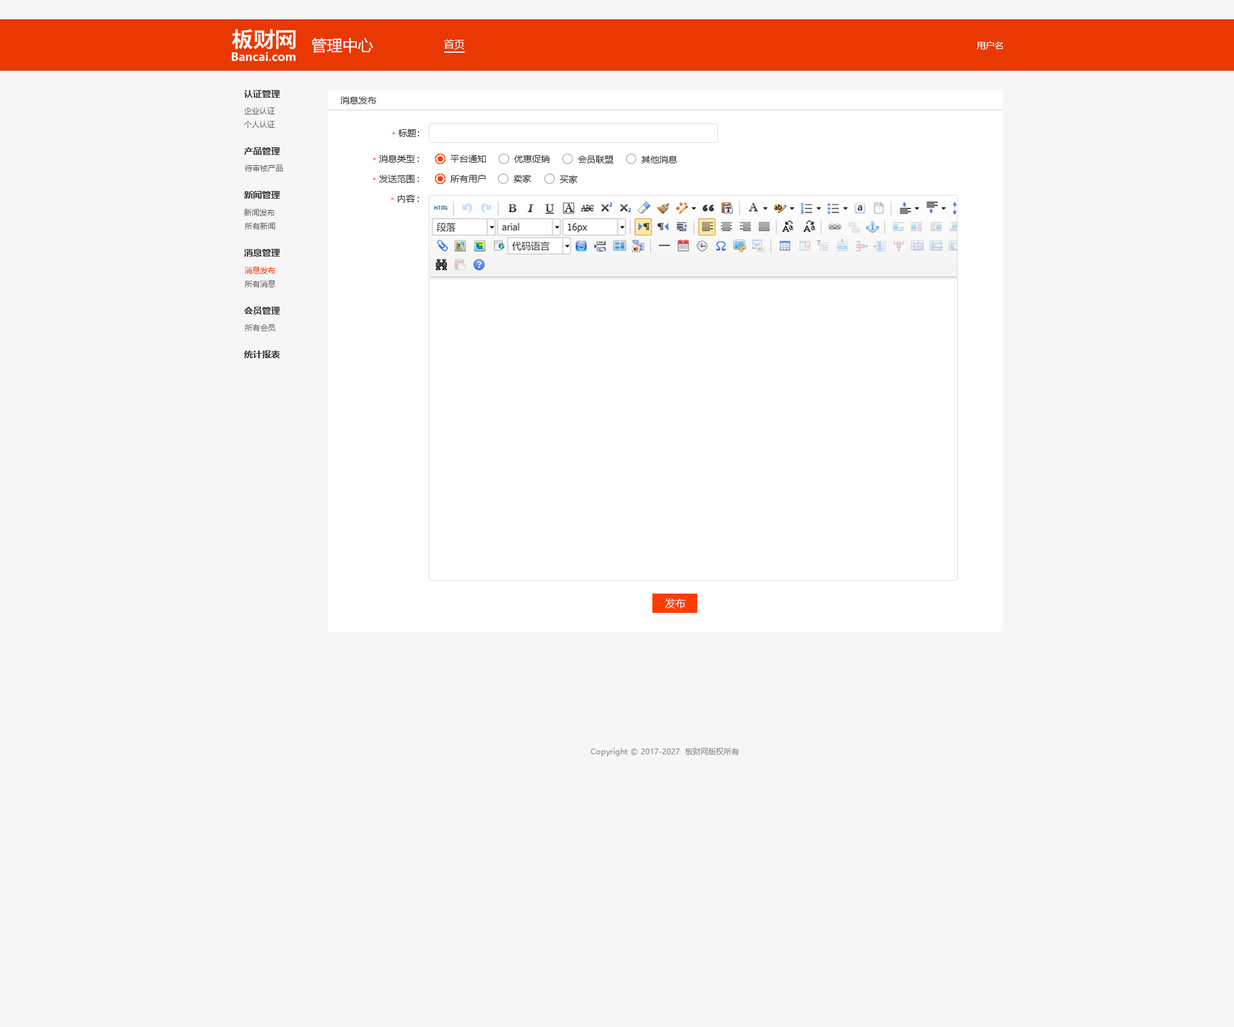
<style>
.page{position:relative;width:1234px;height:1027px;background:#f6f6f6}
.page>*{position:absolute;margin:0}
.t1{font:15.4px "MicrosoftYaHei";color:#ffffff}
.t2{font:10.3px "MicrosoftYaHei";color:#ffffff}
.t3{font:9px "MicrosoftYaHei";color:#ffffff}
.t4{font:9px "MicrosoftYaHei-Bold";color:#333333}
.t5{font:9px "MicrosoftYaHei";color:#333333}
.t6{font:7.7px "MicrosoftYaHei";color:#666666}
.t7{font:7.7px "MicrosoftYaHei";color:#ff3c00}
.t8{font:10.3px "MicrosoftYaHei";color:#fffefe}
.t9{font:7.7px "MicrosoftYaHei";color:#888888}
</style>
<div class="page">
<p class="t1" style="left:312px;top:38px;width:62px;height:15px">管理中心</p>
<p class="t2" style="left:444px;top:39px;width:21px;height:11px">首页</p>
<p class="t3" style="left:977px;top:41px;width:27px;height:9px">用户名</p>
<p class="t4" style="left:244px;top:90px;width:36px;height:8px">认证管理</p>
<p class="t5" style="left:341px;top:96px;width:36px;height:8px">消息发布</p>
<p class="t6" style="left:244px;top:107px;width:31px;height:7px">企业认证</p>
<p class="t6" style="left:244px;top:121px;width:31px;height:7px">个人认证</p>
<p class="t7" style="left:392px;top:132px;width:3px;height:2px">*</p>
<p class="t5" style="left:399px;top:129px;width:20px;height:8px">标题：</p>
<p class="t4" style="left:244px;top:147px;width:36px;height:8px">产品管理</p>
<p class="t7" style="left:373px;top:158px;width:3px;height:2px">*</p>
<p class="t5" style="left:379px;top:155px;width:40px;height:8px">消息类型:</p>
<p class="t5" style="left:451px;top:155px;width:35px;height:8px">平台通知</p>
<p class="t5" style="left:514px;top:155px;width:36px;height:8px">优惠促销</p>
<p class="t5" style="left:578px;top:156px;width:36px;height:7px">会员联盟</p>
<p class="t5" style="left:642px;top:156px;width:36px;height:7px">其他消息</p>
<p class="t6" style="left:245px;top:165px;width:38px;height:7px">待审核产品</p>
<p class="t7" style="left:373px;top:177px;width:3px;height:3px">*</p>
<p class="t5" style="left:379px;top:175px;width:40px;height:8px">发送范围:</p>
<p class="t5" style="left:451px;top:174px;width:35px;height:9px">所有用户</p>
<p class="t5" style="left:514px;top:175px;width:18px;height:8px">卖家</p>
<p class="t5" style="left:560px;top:176px;width:18px;height:7px">买家</p>
<p class="t4" style="left:244px;top:191px;width:36px;height:8px">新闻管理</p>
<p class="t7" style="left:391px;top:197px;width:3px;height:3px">*</p>
<p class="t5" style="left:398px;top:195px;width:21px;height:8px">内容:</p>
<p class="t6" style="left:244px;top:208px;width:31px;height:8px">新闻发布</p>
<p class="t6" style="left:245px;top:222px;width:30px;height:8px">所有新闻</p>
<p class="t4" style="left:244px;top:249px;width:36px;height:7px">消息管理</p>
<p class="t7" style="left:245px;top:266px;width:31px;height:8px">消息发布</p>
<p class="t6" style="left:245px;top:280px;width:31px;height:7px">所有消息</p>
<p class="t4" style="left:244px;top:307px;width:36px;height:7px">会员管理</p>
<p class="t6" style="left:245px;top:324px;width:31px;height:7px">所有会员</p>
<p class="t4" style="left:244px;top:350px;width:36px;height:8px">统计报表</p>
<p class="t8" style="left:665px;top:598px;width:21px;height:10px">发布</p>
<p class="t9" style="left:591px;top:748px;width:148px;height:8px">Copyright © 2017-2027  板财网版权所有</p>
</div>
